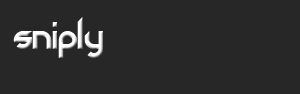
<style>
.page{position:relative;width:300px;height:94px;background:#282727}
.page>*{position:absolute;margin:0}
.t1{font:36px "DirtyFlamingo";letter-spacing:-0.06em;color:#ffffff;text-transform:uppercase}
</style>
<div class="page">
<p class="t1" style="left:13px;top:17px;width:90px;height:41px">sniply</p>
</div>
